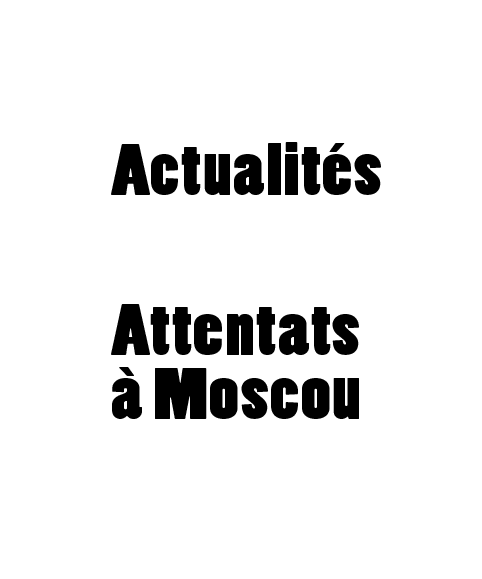
<style>
.page{position:relative;width:482px;height:579px;background:#ffffff}
.page>*{position:absolute;margin:0}
.t1{font:68px/32px "PoplarStd";letter-spacing:0.02em;color:#000000;scale:1.17 1}
</style>
<div class="page">
<p class="t1" style="left:111px;top:142px;width:270px;height:277px">Actualités<br><br><br><br><br>Attentats<br><br>à Moscou</p>
</div>
